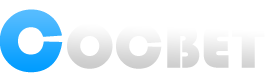
<style>
.page{position:relative;width:265px;height:83px;background:#ffffff}
.page>*{position:absolute;margin:0}
.t1{font:89.7px "Bauhaus93";text-transform:uppercase}
.t2{font:65.3px "Bauhaus93";color:#eaeaea;text-transform:uppercase}
</style>
<div class="page">
<p class="t1" style="left:0px;top:9px;width:63px;height:64px">c</p>
<p class="t2" style="left:67px;top:23px;width:198px;height:46px">ocbet</p>
</div>
